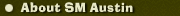
<style>
.page{position:relative;width:180px;height:16px}
.page>*{position:absolute;margin:0}
.t1{font:14px "AdLibICG";letter-spacing:0.05em;color:#e7e7c5}
</style>
<div class="page">
<p class="t1" style="left:20px;top:2px;width:113px;height:11px">About SM Austin</p>
</div>
